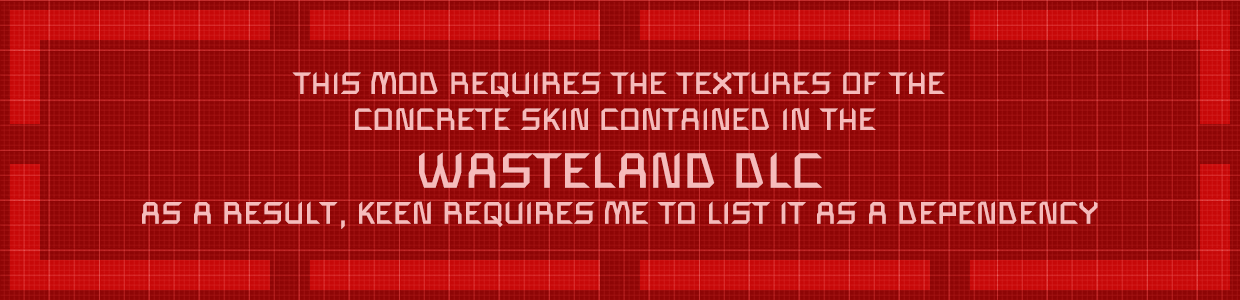
<style>
.page{position:relative;width:1240px;height:300px;background:#8e0505}
.page>*{position:absolute;margin:0}
.t1{font:30px "SpaceEngineers";color:#ffc8c8;font-weight:bold}
.t2{font:48px "SpaceEngineers";color:#ffc8c8;font-weight:bold}
</style>
<div class="page">
<p class="t1" style="left:142px;top:72px;width:956px;height:157px;text-align:center;opacity:0.9">THIS MOD REQUIRES THE TEXTURES OF THE<br>CONCRETE SKIN CONTAINED IN THE <br><span class="t2">WASTELAND DLC<br></span>AS A RESULT, KEEN REQUIRES ME TO LIST IT AS A DEPENDENCY</p>
</div>
